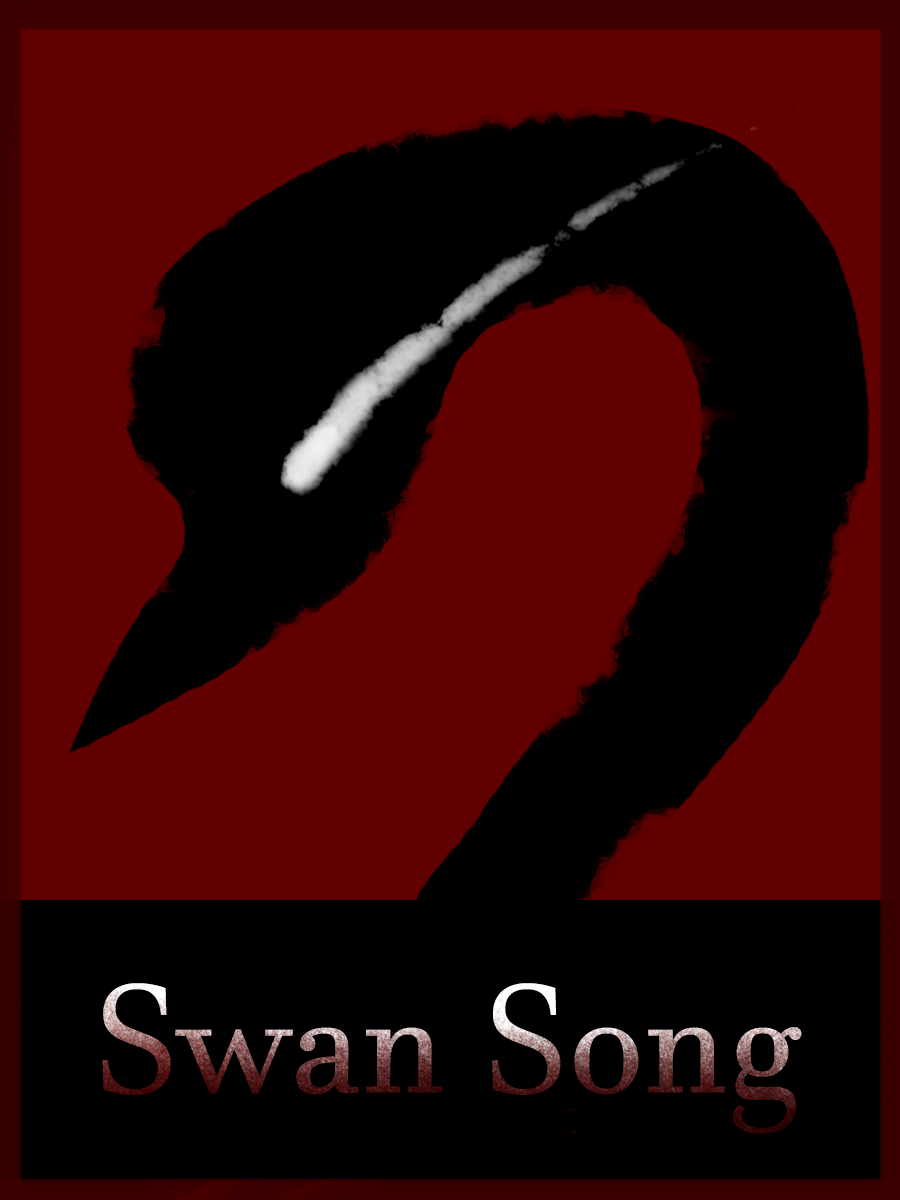
<style>
.page{position:relative;width:900px;height:1200px;background:#000000}
.page>*{position:absolute;margin:0}
.t1{font:150px "JavaneseText"}
</style>
<div class="page">
<p class="t1" style="left:102px;top:983px;width:700px;height:151px">Swan Song</p>
</div>
